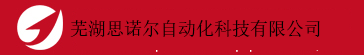
<style>
.page{position:relative;width:364px;height:55px;background:#c30d23}
.page>*{position:absolute;margin:0}
.t1{font:18px "SimSun";color:#000000}
</style>
<div class="page">
<p class="t1" style="left:70px;top:20px;width:250px;height:17px">芜湖思诺尔自动化科技有限公司</p>
</div>
